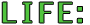
<style>
.page{position:relative;width:90px;height:25px;background:#ffffff}
.page>*{position:absolute;margin:0}
.t1{font:30px "Fixedsys"}
.t2{font:30px "Fixedsys";letter-spacing:-0.025em}
.t3{font:30px "Fixedsys";letter-spacing:-0.025em;color:#4ebe3c;scale:0.75 1}
</style>
<div class="page">
<p class="t1" style="left:2px;top:2px;width:71px;height:21px"><span class="t2">L</span>IFE</p>
<p class="t3" style="left:77px;top:6px;width:6px;height:17px">:</p>
</div>
